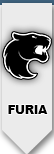
<style>
.page{position:relative;width:54px;height:154px;background:#ebebeb}
.page>*{position:absolute;margin:0}
.t1{font:11.7px "Arial-Black";letter-spacing:-0.01em;color:#000000}
</style>
<div class="page">
<p class="t1" style="left:8px;top:105px;width:40px;height:9px">FURIA</p>
</div>
